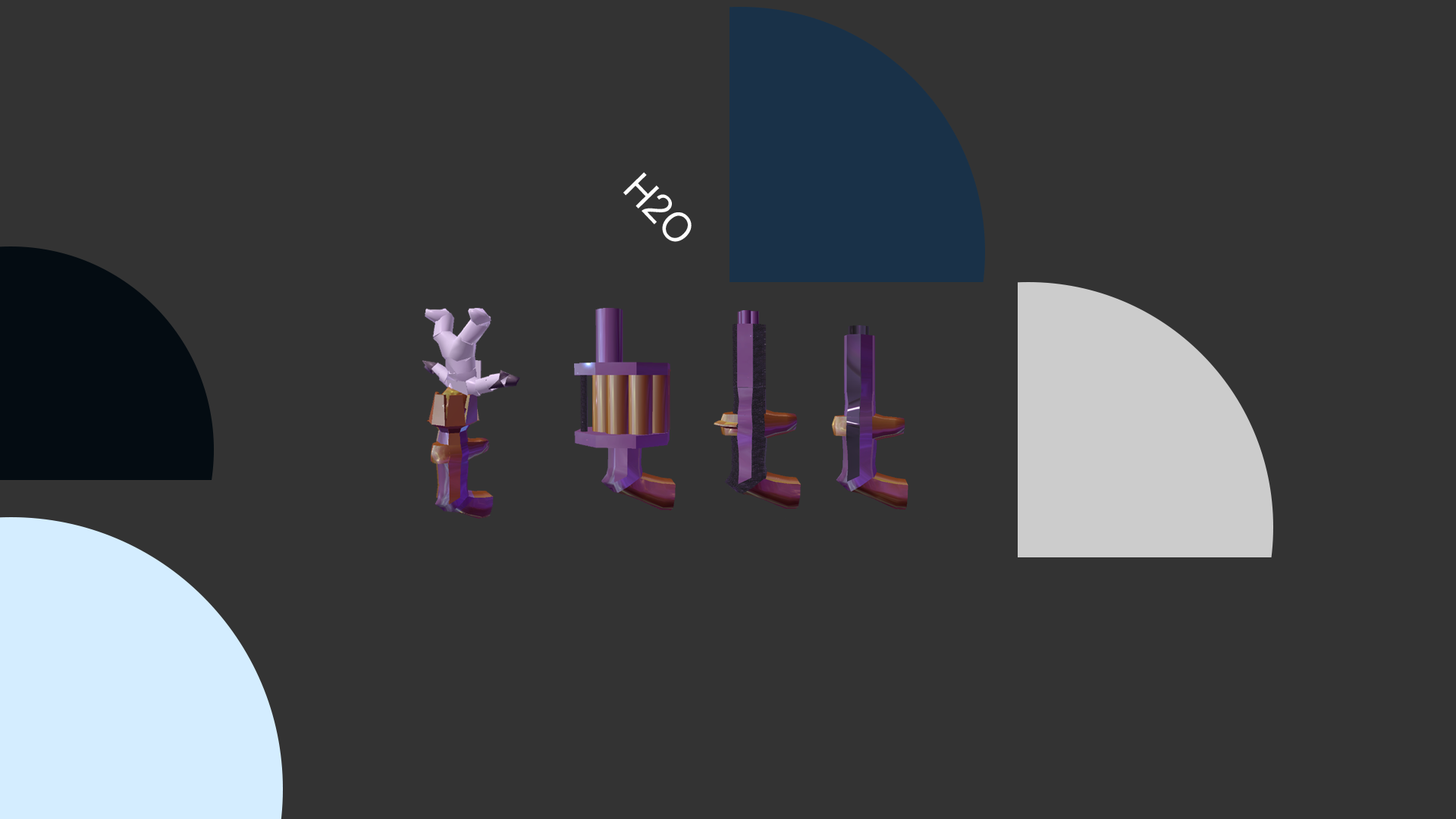
<style>
.page{position:relative;width:1456px;height:819px;background:#333333}
.page>*{position:absolute;margin:0}
.t1{font:40.6px "ArialMT";color:#ffffff;scale:0.96 1}
</style>
<div class="page">
<p class="t1" style="left:623px;top:172px;width:69px;height:70px;rotate:46deg">H2O</p>
</div>
